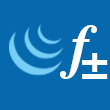
<style>
.page{position:relative;width:110px;height:110px;background:#0769ad}
.page>*{position:absolute;margin:0}
.t1{font:60px "Times-BoldItalic";color:#ffffff}
.t2{font:48px "Times-Bold";color:#ffffff}
</style>
<div class="page">
<p class="t1" style="left:60px;top:25px;width:37px;height:54px">f</p>
<p class="t2" style="left:82px;top:53px;width:26px;height:26px">±</p>
</div>
